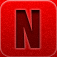
<style>
.page{position:relative;width:57px;height:57px}
.page>*{position:absolute;margin:0}
.t1{font:50px "HelveticaLT-Condensed-Black";letter-spacing:0.075em;color:#5c0000}
</style>
<div class="page">
<p class="t1" style="left:16px;top:10px;width:24px;height:38px">N</p>
</div>
